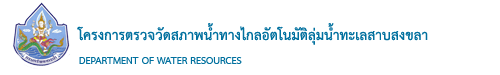
<style>
.page{position:relative;width:500px;height:75px;background:#ffffff}
.page>*{position:absolute;margin:0}
.t1{font:20px "THSarabunPSK-Bold";color:#00709e}
.t2{font:14px "THSarabunNew-Bold";color:#00709e}
</style>
<div class="page">
<p class="t1" style="left:77px;top:23px;width:351px;height:22px">โครงการตรวจวัดสภาพน้ำทางไกลอัตโนมัติลุ่มน้ำทะเลสาบสงขลา</p>
<p class="t2" style="left:79px;top:57px;width:163px;height:7px">DEPARTMENT OF WATER RESOURCES</p>
</div>
